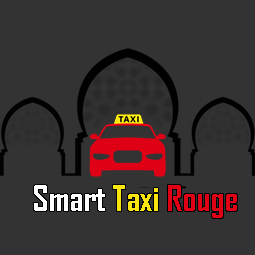
<style>
.page{position:relative;width:255px;height:255px;background:#333333}
.page>*{position:absolute;margin:0}
.t1{font:34.3px "AgencyFB-Bold";color:#ffffff}
.t2{font:34.3px "AgencyFB-Bold";color:#fbe50f}
.t3{font:34.3px "AgencyFB-Bold";color:#e00016}
</style>
<div class="page">
<p class="t1" style="left:34px;top:185px;width:203px;height:33px">Smart <span class="t2">Taxi </span><span class="t3">Rouge</span></p>
</div>
